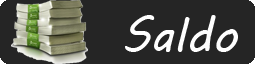
<style>
.page{position:relative;width:255px;height:64px;background:#252525}
.page>*{position:absolute;margin:0}
.t1{font:48px "MVBoli";color:#ffffff}
</style>
<div class="page">
<p class="t1" style="left:125px;top:15px;width:113px;height:37px">Saldo</p>
</div>
